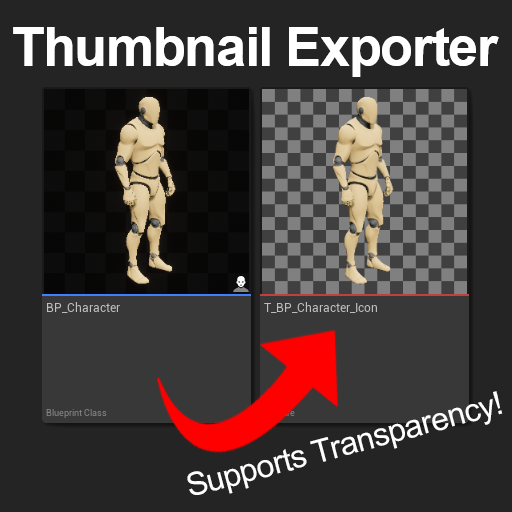
<style>
.page{position:relative;width:512px;height:512px;background:#242424}
.page>*{position:absolute;margin:0}
.t1{font:54px "Arial-BoldMT";letter-spacing:-0.025em;color:#ffffff}
.t2{font:32px "ArialMT";letter-spacing:-0.025em;color:#ffffff}
</style>
<div class="page">
<p class="t1" style="left:13px;top:27px;width:486px;height:50px">Thumbnail Exporter</p>
<p class="t2" style="left:187px;top:391px;width:316px;height:104px;rotate:-15deg">Supports Transparency!</p>
</div>
